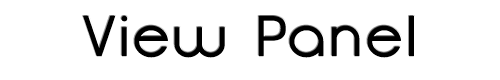
<style>
.page{position:relative;width:500px;height:80px;background:#ffffff}
.page>*{position:absolute;margin:0}
.t1{font:56.4px "Opificio";letter-spacing:0.055em;color:#000000;font-weight:bold;scale:1.06 1}
</style>
<div class="page">
<p class="t1" style="left:83px;top:16px;width:331px;height:42px">View Panel</p>
</div>
